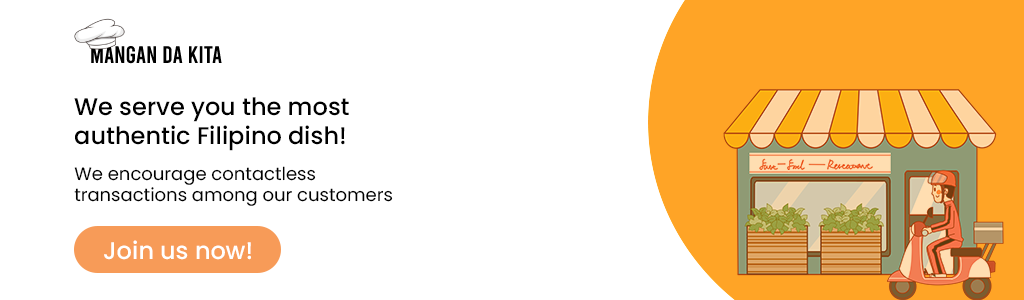
<style>
.page{position:relative;width:1024px;height:300px;background:#ffffff}
.page>*{position:absolute;margin:0}
.t1{font:24px "Poppins-Medium";color:#000000}
.t2{font:24px "Poppins-Medium";color:#f79b58}
.t3{font:18px "Poppins-Regular";color:#000000}
.t4{font:24px "Poppins-Medium";color:#ffffff}
</style>
<div class="page">
<p class="t1" style="left:74px;top:97px;width:275px;height:54px"><span class="t2"><br></span>We serve you the most <br>authentic Filipino dish!</p>
<p class="t3" style="left:74px;top:166px;width:319px;height:40px">We encourage contactless <br>transactions among our customers</p>
<p class="t4" style="left:104px;top:240px;width:147px;height:20px">Join us now!</p>
</div>
